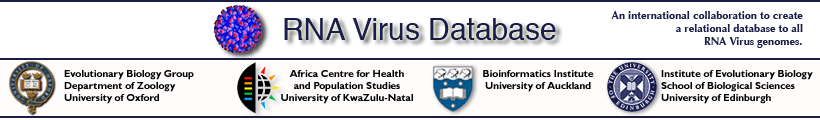
<style>
.page{position:relative;width:820px;height:120px;background:#ffffff}
.page>*{position:absolute;margin:0}
.t1{font:11px "Optima-Bold";color:#191d48}
.t2{font:30px "Helvetica";color:#191d48}
.t3{font:10px "GillSansMT-Bold";color:#000000}
</style>
<div class="page">
<p class="t1" style="left:611px;top:11px;width:192px;height:37px;text-align:right">An international collaboration to create <br>a relational database to all <br>RNA Virus genomes.</p>
<p class="t2" style="left:284px;top:18px;width:272px;height:22px">RNA Virus Database</p>
<p class="t3" style="left:64px;top:70px;width:130px;height:34px">Evolutionary Biology Group<br>Department of Zoology<br>University of Oxford</p>
<p class="t3" style="left:281px;top:70px;width:132px;height:34px;text-align:center">Africa Centre for Health <br>and Population Studies<br>University of KwaZulu-Natal</p>
<p class="t3" style="left:483px;top:70px;width:111px;height:22px;text-align:center">Bioinformatics Institute<br>University of Auckland</p>
<p class="t3" style="left:661px;top:70px;width:152px;height:34px">Institute of Evolutionary Biology<br>School of Biological Sciences<br>University of Edinburgh</p>
</div>
